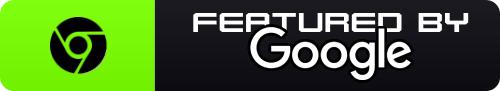
<style>
.page{position:relative;width:500px;height:91px}
.page>*{position:absolute;margin:0}
.t1{font:25.3px "Karnivore";color:#ffffff;scale:1.23 1}
</style>
<div class="page">
<p class="t1" style="left:193px;top:12px;width:276px;height:20px">FEATURED BY</p>
</div>
